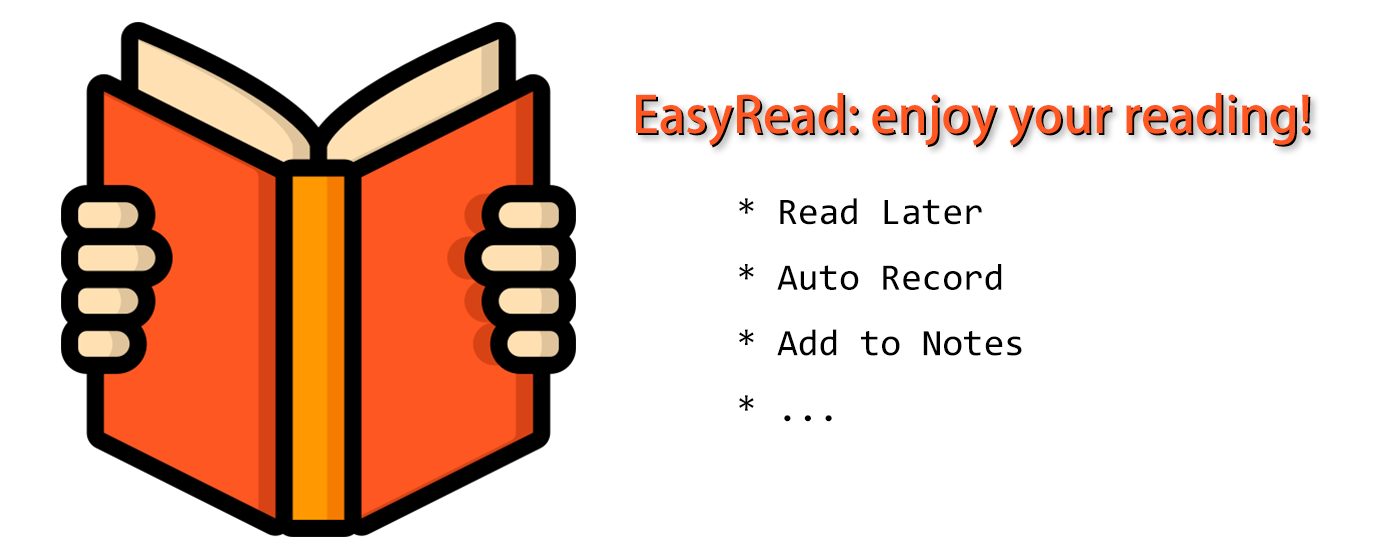
<style>
.page{position:relative;width:1400px;height:560px;background:#ffffff}
.page>*{position:absolute;margin:0}
.t1{font:50px "AdobeHeitiStd-Regular";color:#ff5722}
.t2{font:50px "AdobeHeitiStd-Regular"}
.t3{font:37.5px "Consolas";color:#000000}
</style>
<div class="page">
<p class="t1" style="left:636px;top:93px;width:673px;height:53px">EasyRead: enjoy your reading!</p>
<p class="t2" style="left:638px;top:95px;width:673px;height:53px">EasyRead: enjoy your reading!</p>
<p class="t3" style="left:739px;top:198px;width:283px;height:224px">* Read Later<br>* Auto Record<br>* Add to Notes<br>* ...</p>
</div>
